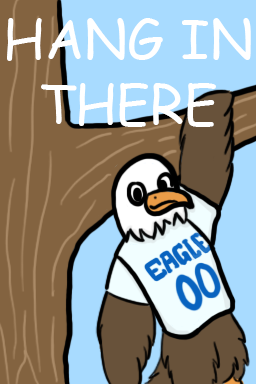
<style>
.page{position:relative;width:256px;height:384px;background:#a8dbff}
.page>*{position:absolute;margin:0}
.t1{font:54.2px "ComicSansMS";color:#ffffff;text-transform:uppercase}
</style>
<div class="page">
<p class="t1" style="left:7px;top:18px;width:244px;height:109px;text-align:center">Hang in There</p>
</div>
